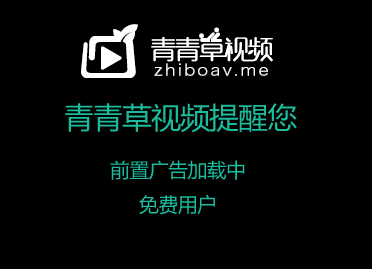
<style>
.page{position:relative;width:372px;height:269px;background:#000000}
.page>*{position:absolute;margin:0}
.t1{font:29.6px "MicrosoftYaHei";letter-spacing:-0.02em;color:#1bbc9d}
.t2{font:19.7px "MicrosoftYaHei";letter-spacing:-0.02em;color:#1bbc9d}
</style>
<div class="page">
<p class="t1" style="left:65px;top:103px;width:232px;height:30px">青青草视频提醒您</p>
<p class="t2" style="left:110px;top:160px;width:135px;height:55px;text-align:center">前置广告加载中<br>免费用户</p>
</div>
